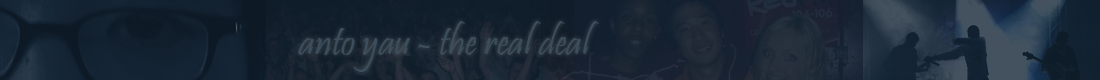
<style>
.page{position:relative;width:1100px;height:80px}
.page>*{position:absolute;margin:0}
.t1{font:40px "Pristina-Regular";color:#3c4d5e}
</style>
<div class="page">
<p class="t1" style="left:298px;top:21px;width:301px;height:51px">anto yau - the real deal</p>
</div>
